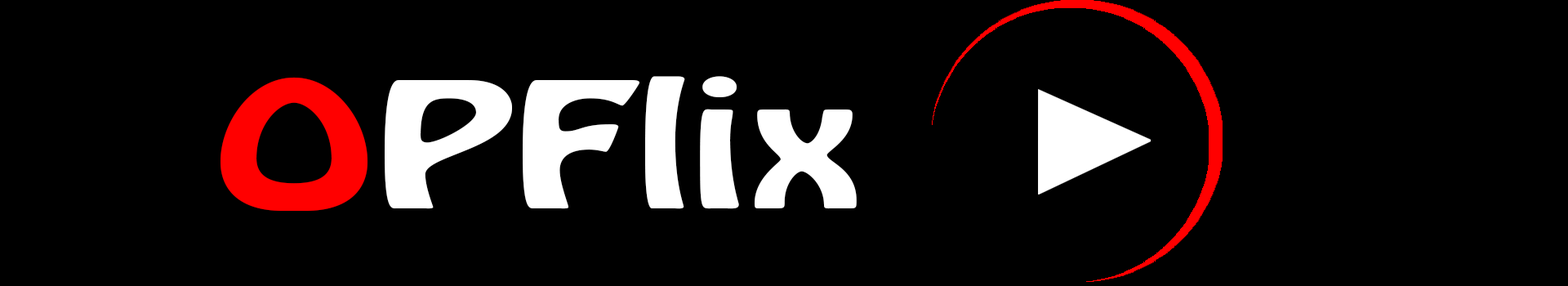
<style>
.page{position:relative;width:1568px;height:286px;background:#000000}
.page>*{position:absolute;margin:0}
.t1{font:154.5px "HoboStd";color:#ffffff;scale:1.44 1}
.t2{font:154.5px "HoboStd";color:#ff0000;scale:1.44 1}
</style>
<div class="page">
<p class="t1" style="left:220px;top:76px;width:637px;height:135px"><span class="t2">O</span>PFlix</p>
</div>
